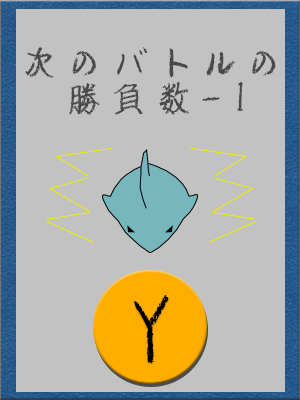
<style>
.page{position:relative;width:300px;height:400px;background:#c2c2c2}
.page>*{position:absolute;margin:0}
.t1{font:33.7px/36px "AB-chalk";letter-spacing:0.46em;color:#484848;scale:0.91 1}
.t2{font:75px "AB-chalk";letter-spacing:0.34em;color:#010000}
</style>
<div class="page">
<p class="t1" style="left:25px;top:46px;width:251px;height:69px">次のバトルの<br>　勝負数-1</p>
<p class="t2" style="left:134px;top:295px;width:35px;height:69px">Y</p>
</div>
